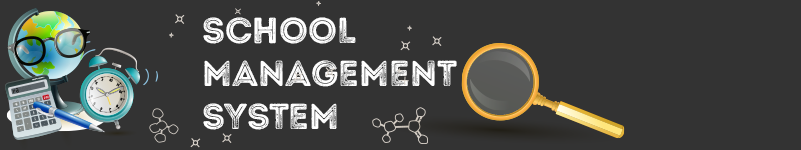
<style>
.page{position:relative;width:801px;height:150px;background:#333333}
.page>*{position:absolute;margin:0}
.t1{font:36px "IntroRustG-Base2Line";color:#ffffff}
</style>
<div class="page">
<p class="t1" style="left:203px;top:17px;width:254px;height:113px">SCHOOL <br>MANAGEMENT<br>SYSTEM</p>
</div>
